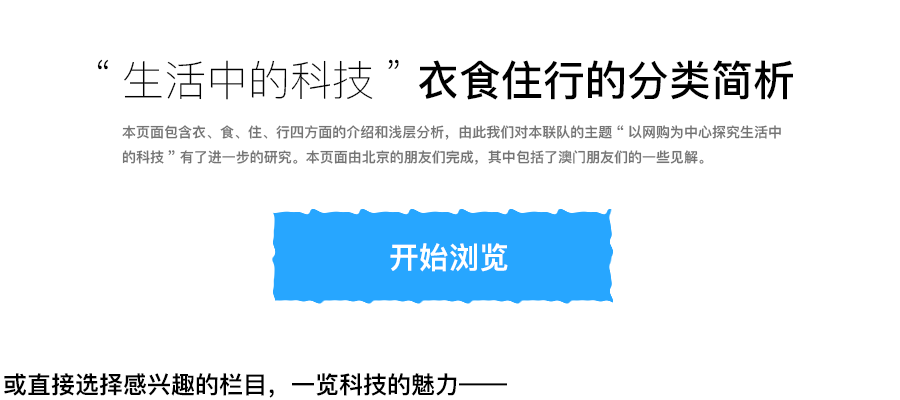
<style>
.page{position:relative;width:900px;height:400px;background:#ffffff}
.page>*{position:absolute;margin:0}
.t1{font:42px "PingFang-SC-Bold";color:#000000}
.t2{font:42px "PingFang-SC-Light";color:#000000}
.t3{font:14px "PingFang-SC-Heavy";color:#747474}
.t4{font:30px "PingFang-SC-Heavy";color:#ffffff}
.t5{font:24px "PingFang-SC-Heavy";color:#000000}
</style>
<div class="page">
<p class="t1" style="left:97px;top:59px;width:696px;height:41px"><span class="t2">“生活中的科技” </span>衣食住行的分类简析</p>
<p class="t3" style="left:122px;top:125px;width:659px;height:40px">本页面包含衣、食、住、行四方面的介绍和浅层分析，由此我们对本联队的主题“以网购为中心探究生活中的科技”有了进一步的研究。本页面由北京的朋友们完成，其中包括了澳门朋友们的一些见解。</p>
<p class="t4" style="left:390px;top:243px;width:118px;height:29px">开始浏览</p>
<p class="t5" style="left:4px;top:373px;width:503px;height:25px">或直接选择感兴趣的栏目，一览科技的魅力——</p>
</div>
